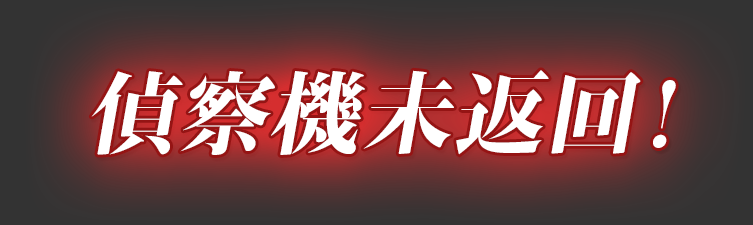
<style>
.page{position:relative;width:753px;height:225px}
.page>*{position:absolute;margin:0}
.t1{font:90px "KochoStd-Heavy";letter-spacing:0.02em;color:#ffffff;font-style:italic}
</style>
<div class="page">
<p class="t1" style="left:91px;top:70px;width:585px;height:85px">偵察機未返回！</p>
</div>
